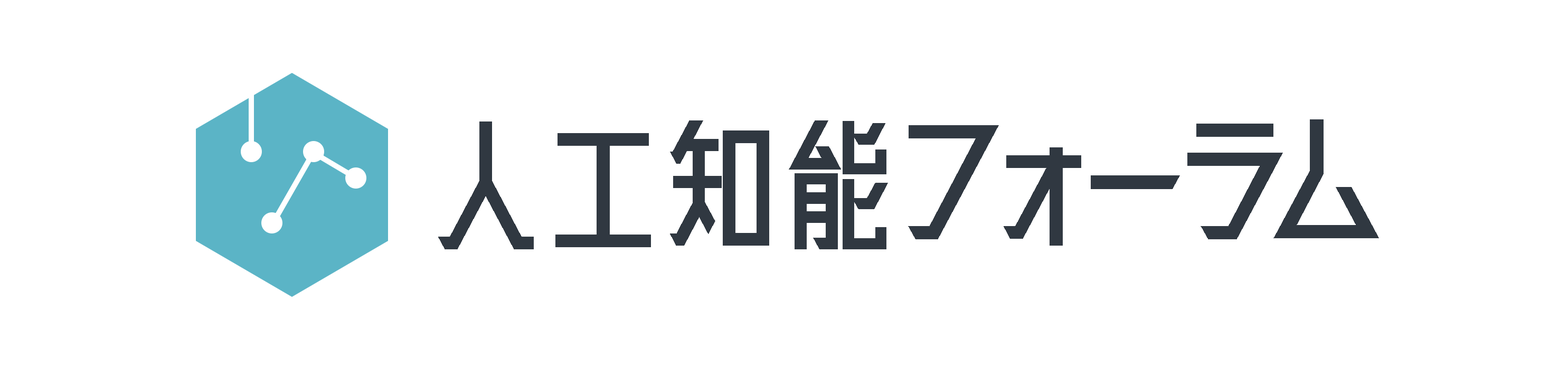
<style>
.page{position:relative;width:1568px;height:365px;background:#ffffff}
.page>*{position:absolute;margin:0}
.t1{font:166.3px "Kaisotai-Next-UP-B";letter-spacing:-0.05em;color:#303841}
.t2{font:156.9px "Kaisotai-Next-UP-B";letter-spacing:-0.05em;color:#303841}
</style>
<div class="page">
<p class="t1" style="left:438px;top:119px;width:941px;height:130px"><span class="t2">人工知能</span>フォーラム</p>
</div>
